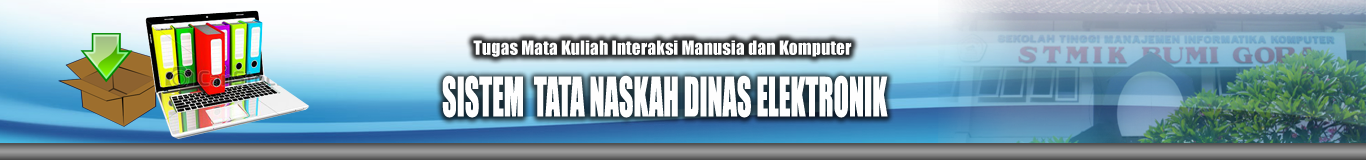
<style>
.page{position:relative;width:1366px;height:160px}
.page>*{position:absolute;margin:0}
.t1{font:18px "Impact";color:#fefefe}
.t2{font:50.2px "Impact";color:#fefefe;scale:0.56 1}
</style>
<div class="page">
<p class="t1" style="left:473px;top:40px;width:379px;height:17px">Tugas Mata Kuliah Interaksi Manusia dan Komputer</p>
<p class="t2" style="left:442px;top:75px;width:446px;height:43px">SISTEM  TATA NASKAH DINAS ELEKTRONIK</p>
</div>
